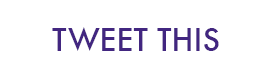
<style>
.page{position:relative;width:272px;height:80px;background:#ffffff}
.page>*{position:absolute;margin:0}
.t1{font:30px "Futura-Medium";color:#422680}
</style>
<div class="page">
<p class="t1" style="left:52px;top:27px;width:167px;height:24px">TWEET THIS</p>
</div>
